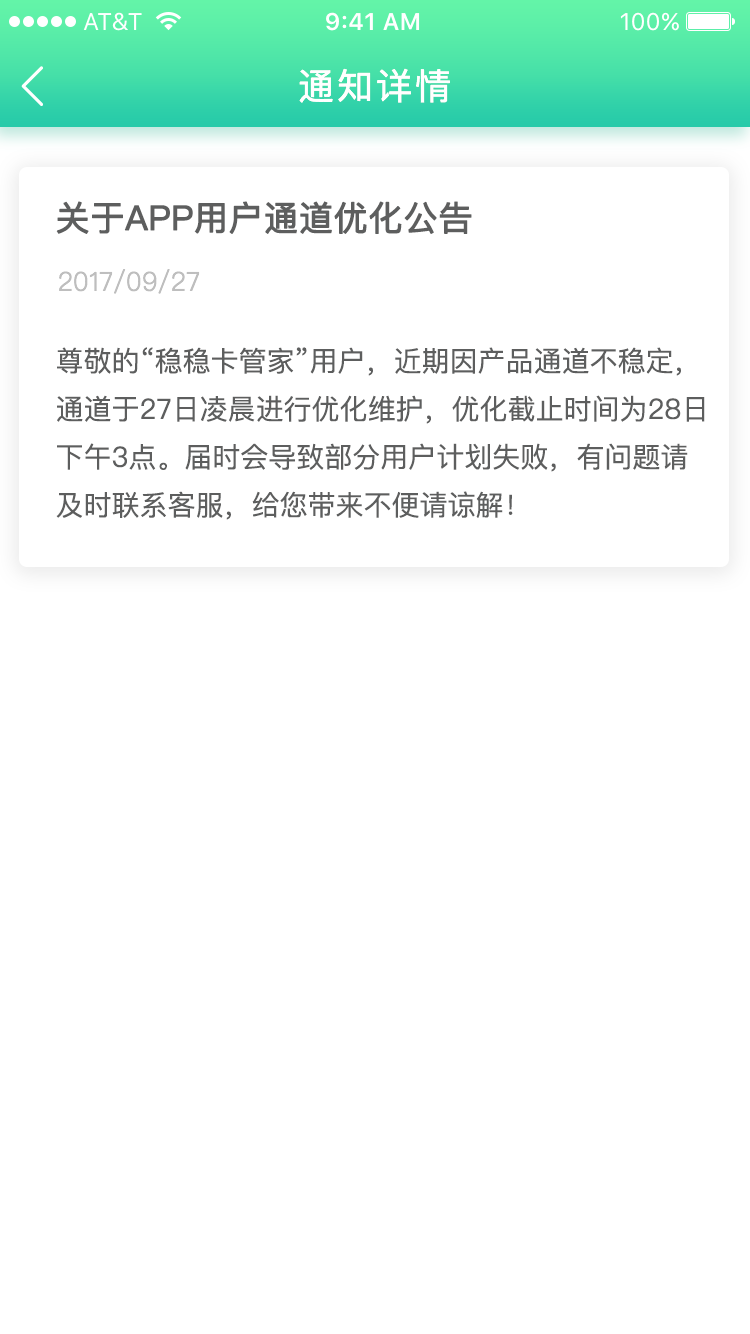
<style>
.page{position:relative;width:750px;height:1334px;background:#ffffff}
.page>*{position:absolute;margin:0}
.t1{font:36px "PingFangSC-Regular";letter-spacing:0.08em;color:#ffffff}
.t2{font:34px "PingFangSC-Regular";color:#5d5e5e;font-weight:bold}
.t3{font:26px "PingFangSC-Light";color:#bebebe}
.t4{font:28px/48px "PingFangSC-Regular";color:#5d5e5e}
</style>
<div class="page">
<p class="t1" style="left:299px;top:68px;width:151px;height:35px">通知详情</p>
<p class="t2" style="left:56px;top:201px;width:416px;height:33px">关于APP用户通道优化公告</p>
<p class="t3" style="left:59px;top:269px;width:141px;height:25px">2017/09/27</p>
<p class="t4" style="left:56px;top:347px;width:649px;height:173px">尊敬的“稳稳卡管家”用户，近期因产品通道不稳定，<br>通道于27日凌晨进行优化维护，优化截止时间为28日<br>下午3点。届时会导致部分用户计划失败，有问题请<br>及时联系客服，给您带来不便请谅解！</p>
</div>
